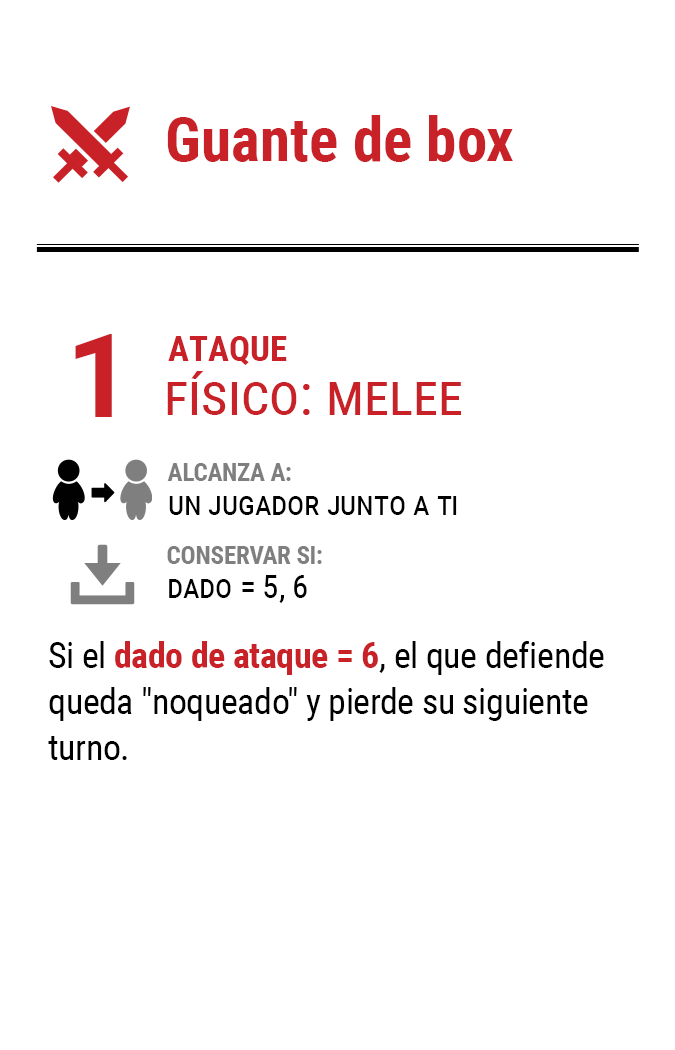
<style>
.page{position:relative;width:675px;height:1050px;background:#ffffff}
.page>*{position:absolute;margin:0}
.t1{font:61.2px "RobotoCondensed-Bold";color:#c82127}
.t2{font:116.7px "Roboto-Bold";letter-spacing:-0.16em;color:#c82127}
.t3{font:35px "RobotoCondensed-Bold";color:#c82127}
.t4{font:58.3px "RobotoCondensed-Regular";color:#c82127;font-variant:small-caps}
.t5{font:33.3px/33.3px "RobotoCondensed-Regular";letter-spacing:-0.01em;color:#000000;font-variant:small-caps}
.t6{font:25px/33.3px "RobotoCondensed-Bold";letter-spacing:-0.01em;color:#7f7f7f}
.t7{font:35.8px/45.8px "RobotoCondensed-Regular";letter-spacing:-0.01em;color:#000000}
.t8{font:35.8px/45.8px "RobotoCondensed-Bold";letter-spacing:-0.01em;color:#c82127}
</style>
<div class="page">
<p class="t1" style="left:167px;top:115px;width:346px;height:47px">Guante de box</p>
<p class="t2" style="left:75px;top:334px;width:37px;height:83px">1</p>
<p class="t3" style="left:168px;top:336px;width:119px;height:29px">ATAQUE</p>
<p class="t4" style="left:167px;top:371px;width:294px;height:44px">físico: melee</p>
<p class="t5" style="left:167px;top:463px;width:290px;height:52px"><span class="t6">ALCANZA A:<br></span>un jugador junto a ti</p>
<p class="t6" style="left:167px;top:546px;width:155px;height:57px">CONSERVAR SI:<br><span class="t5">dado = 5, 6</span></p>
<p class="t7" style="left:48px;top:641px;width:556px;height:119px">Si el <span class="t8">dado de ataque = 6</span>, el que defiende queda "noqueado" y pierde su siguiente turno.</p>
</div>
